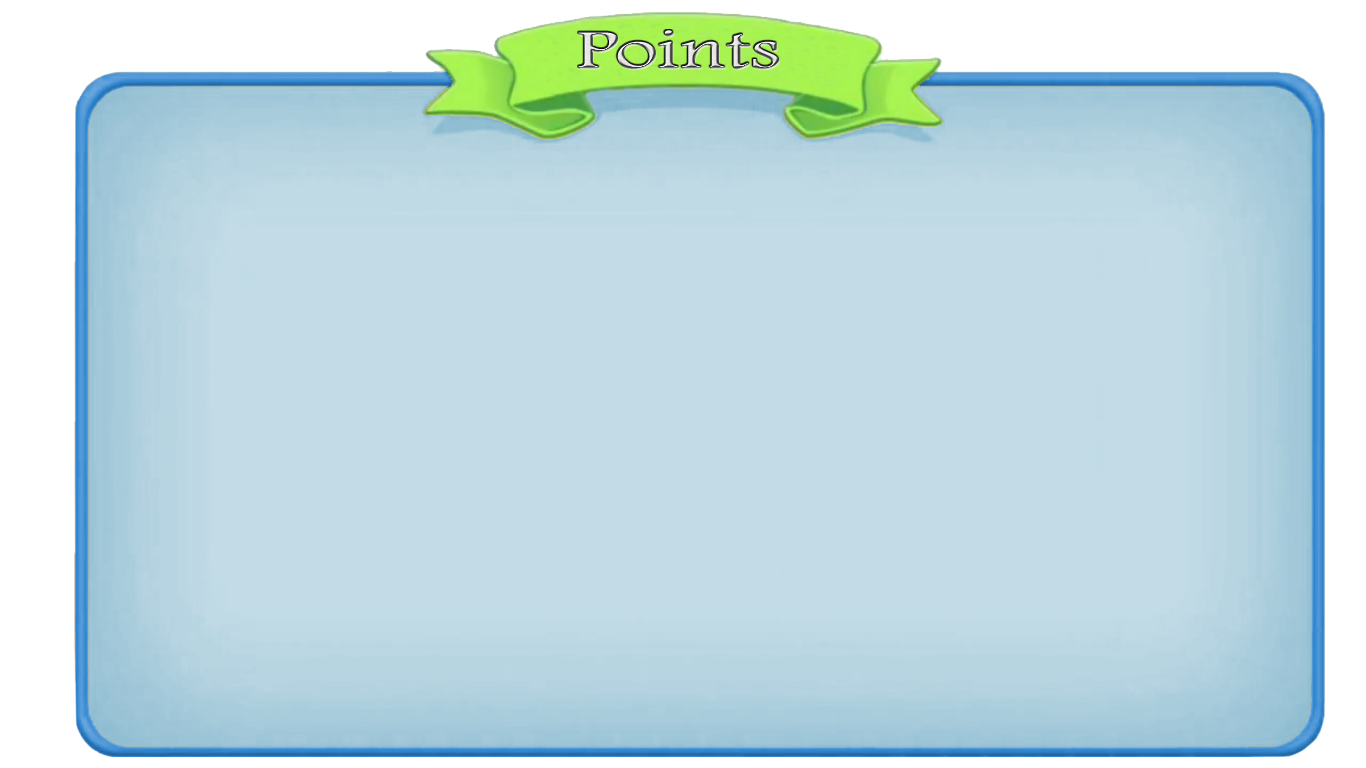
<style>
.page{position:relative;width:1366px;height:768px;background:#c2dbe6}
.page>*{position:absolute;margin:0}
.t1{font:56px "K-Sina";scale:1.49 1}
</style>
<div class="page">
<p class="t1" style="left:578px;top:30px;width:201px;height:39px">Points</p>
</div>
